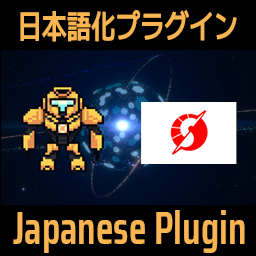
<style>
.page{position:relative;width:256px;height:256px;background:#000000}
.page>*{position:absolute;margin:0}
.t1{font:32.4px "MPLUS1-SemiBold";color:#f8b551;font-weight:bold;scale:0.76 1}
.t2{font:46.8px "SairaCondensed-SemiBold";color:#f8b551;scale:0.88 1}
</style>
<div class="page">
<p class="t1" style="left:20px;top:10px;width:217px;height:32px">日本語化プラグイン</p>
<p class="t2" style="left:13px;top:210px;width:232px;height:43px">Japanese Plugin</p>
</div>
